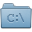
<style>
.page{position:relative;width:32px;height:32px;background:#ffffff}
.page>*{position:absolute;margin:0}
.t1{font:13px "CourierNewPS-BoldMT";letter-spacing:-0.125em;color:#55819e}
.t2{font:13px "CourierNewPS-BoldMT";letter-spacing:-0.2em;color:#55819e}
.t3{font:11px "CourierNewPS-BoldMT";letter-spacing:-0.1em;color:#55819e}
</style>
<div class="page">
<p class="t1" style="left:7px;top:13px;width:17px;height:9px">C<span class="t2">:</span><span class="t3">\</span></p>
</div>
